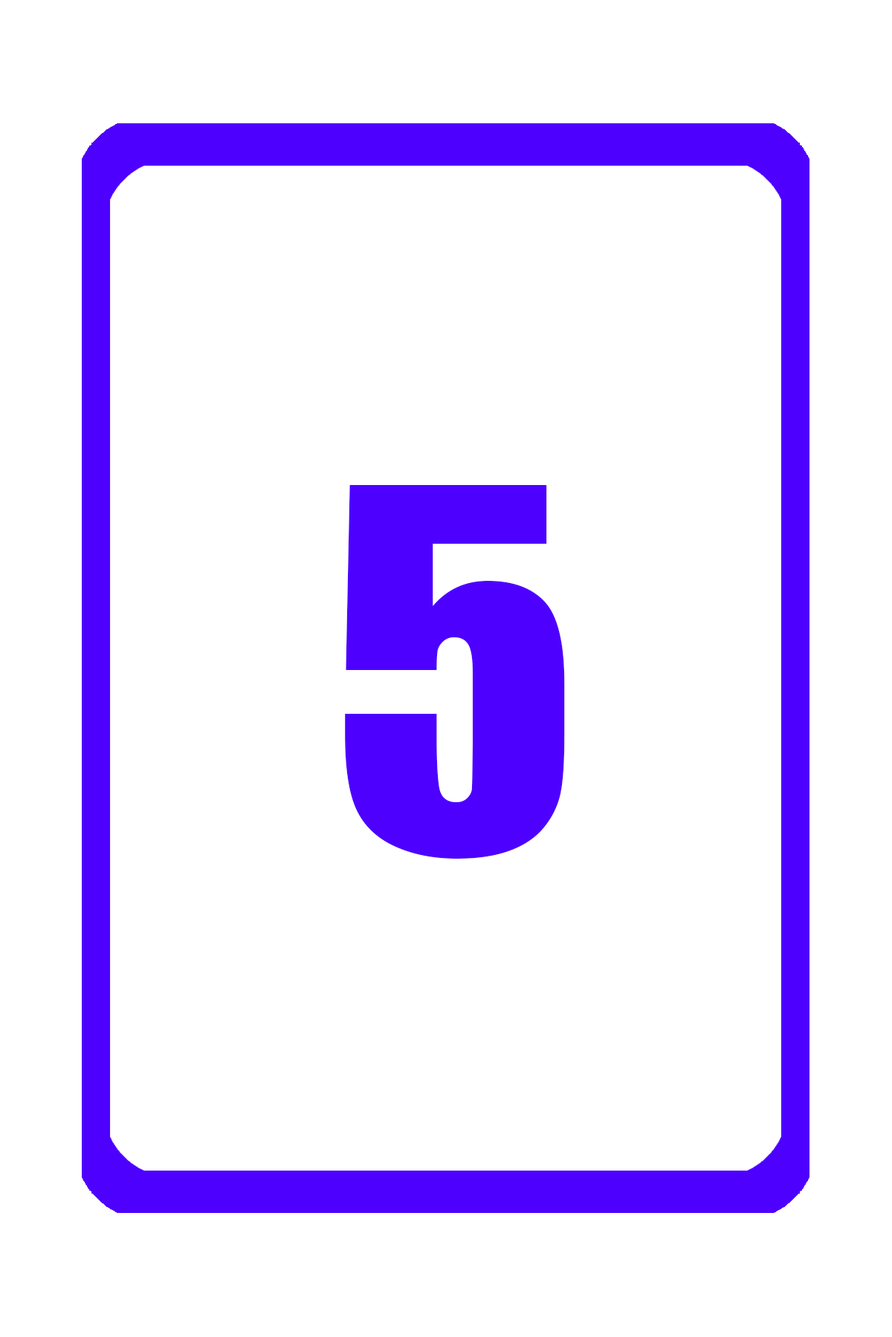
<style>
.page{position:relative;width:892px;height:1337px;background:#ffffff}
.page>*{position:absolute;margin:0}
.t1{font:464.4px "Impact";color:#4e00ff}
</style>
<div class="page">
<p class="t1" style="left:345px;top:485px;width:220px;height:374px">5</p>
</div>
